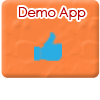
<style>
.page{position:relative;width:100px;height:100px;background:#ffffff}
.page>*{position:absolute;margin:0}
.t1{font:14px "CenturyGothic";color:#b90000;scale:0.9 1}
</style>
<div class="page">
<p class="t1" style="left:19px;top:7px;width:67px;height:13px">Demo App</p>
</div>
